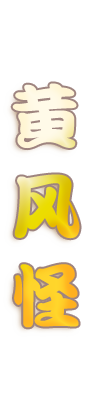
<style>
.page{position:relative;width:89px;height:402px;background:#ffffff}
.page>*{position:absolute;margin:0}
.t1{font:70px/18px "DFPKanTingLiuW9"}
</style>
<div class="page">
<p class="t1" style="left:12px;top:83px;width:68px;height:245px">黄<br><br><br><br><br>风<br><br><br><br><br>怪</p>
</div>
